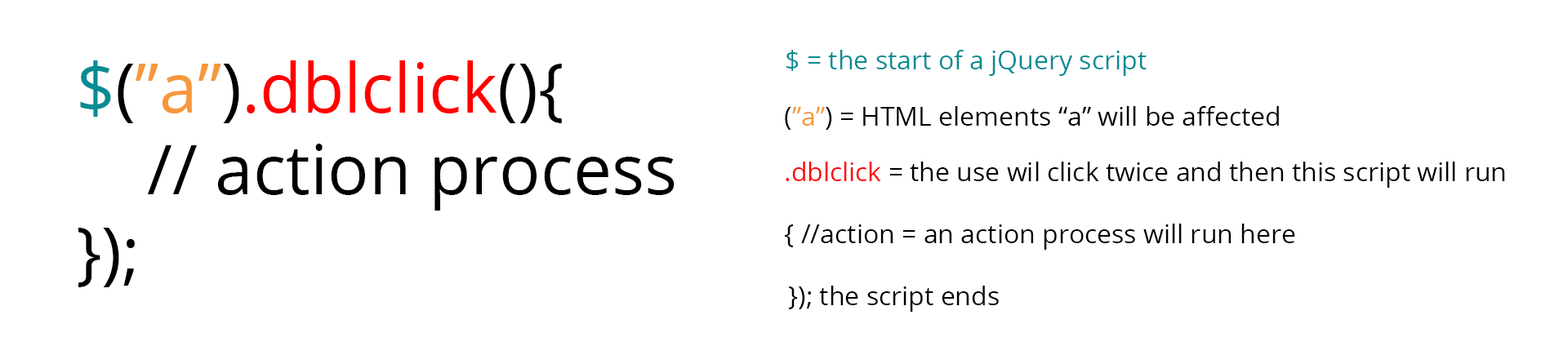
<style>
.page{position:relative;width:1568px;height:355px;background:#ffffff}
.page>*{position:absolute;margin:0}
.t1{font:26.1px "OpenSans";color:#078c94}
.t2{font:68.6px "OpenSans";color:#000000}
.t3{font:68.6px "OpenSans";color:#078c94}
.t4{font:68.6px "OpenSans";color:#f6983d}
.t5{font:68.6px "OpenSans";color:#ff0000}
.t6{font:26.1px "OpenSans";color:#000000}
.t7{font:26.1px "OpenSans";color:#f6983d}
.t8{font:26.1px "OpenSans";color:#ff0000}
</style>
<div class="page">
<p class="t1" style="left:786px;top:50px;width:361px;height:26px">$ = the start of a jQuery script</p>
<p class="t2" style="left:78px;top:60px;width:597px;height:227px"><span class="t3">$</span>(<span class="t4">”a”</span>)<span class="t5">.dblclick</span>(){<br>    // action process<br>});</p>
<p class="t6" style="left:785px;top:106px;width:494px;height:24px">(<span class="t7">”a”</span>) = HTML elements “a” will be affected</p>
<p class="t6" style="left:786px;top:162px;width:719px;height:26px"><span class="t8">.dblclick</span> = the use wil click twice and then this script will run</p>
<p class="t6" style="left:785px;top:224px;width:510px;height:26px">{ //action = an action process will run here</p>
<p class="t6" style="left:789px;top:286px;width:210px;height:26px">}); the script ends</p>
</div>
